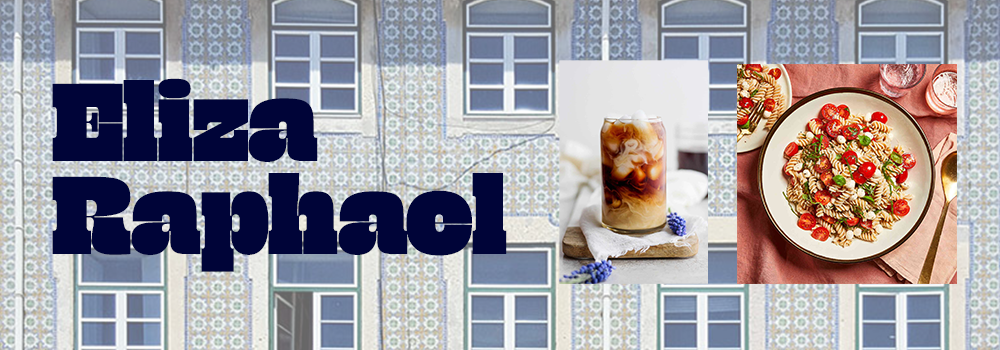
<style>
.page{position:relative;width:1000px;height:350px}
.page>*{position:absolute;margin:0}
.t1{font:77.2px "Gigantic";color:#000438}
</style>
<div class="page">
<p class="t1" style="left:52px;top:78px;width:455px;height:194px">Eliza<br>Raphael</p>
</div>
